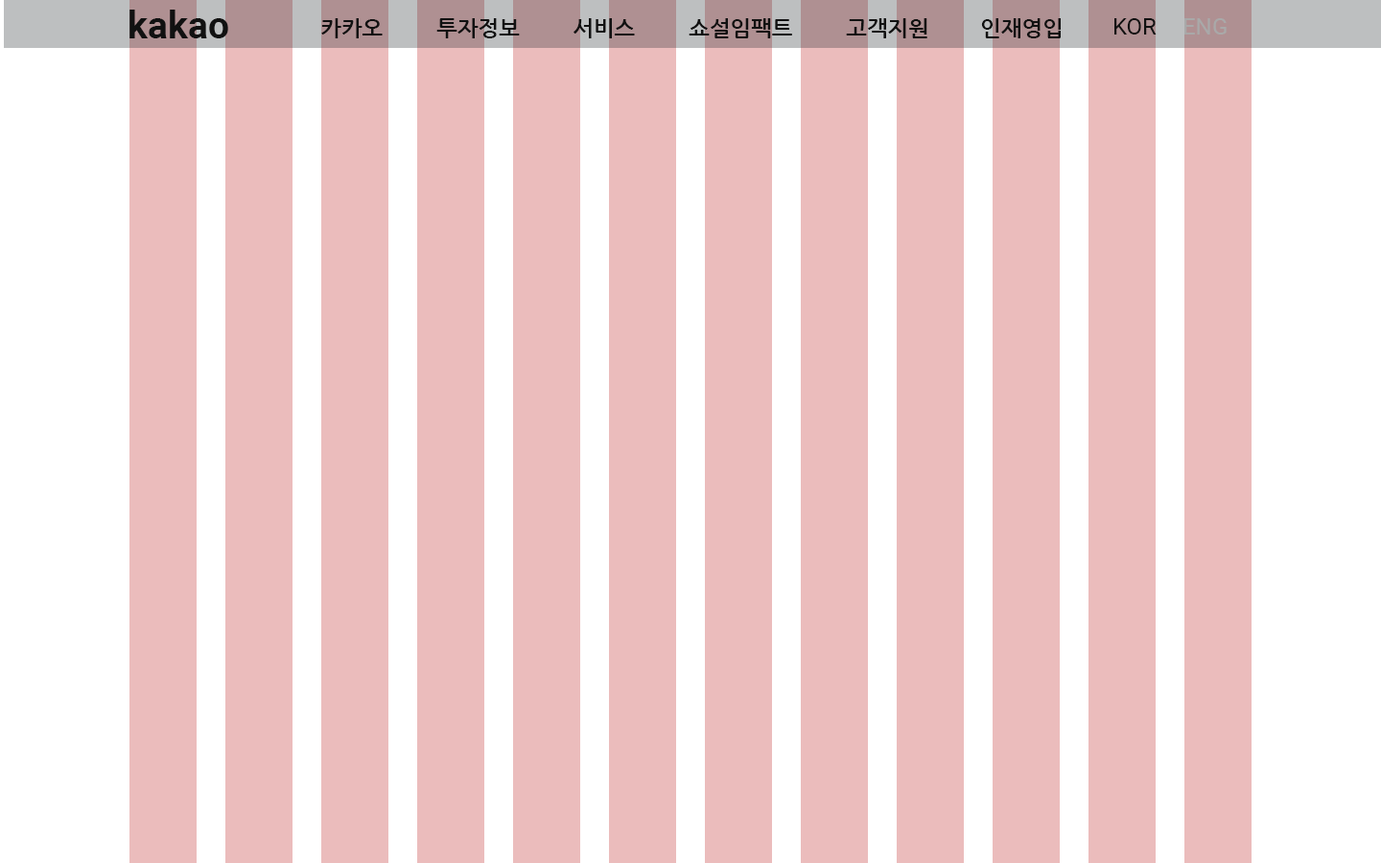
<style>
.page{position:relative;width:1381px;height:863px;background:#ebbcbc}
.page>*{position:absolute;margin:0}
.t1{font:37.4px "Roboto-Bold";color:#111111}
.t2{font:22.1px "NanumGothicBold";color:#111111}
.t3{font:23px "Roboto-Regular";color:#111111}
.t4{font:23px "Roboto-Regular";color:#a9a9a9}
</style>
<div class="page">
<p class="t1" style="left:129px;top:10px;width:99px;height:28px">kakao</p>
<p class="t2" style="left:321px;top:18px;width:62px;height:20px">카카오</p>
<p class="t2" style="left:436px;top:18px;width:84px;height:20px">투자정보</p>
<p class="t2" style="left:574px;top:18px;width:61px;height:20px">서비스</p>
<p class="t2" style="left:689px;top:18px;width:103px;height:20px">쇼설임팩트</p>
<p class="t2" style="left:846px;top:18px;width:82px;height:20px">고객지원</p>
<p class="t2" style="left:981px;top:18px;width:80px;height:20px">인재영입</p>
<p class="t3" style="left:1115px;top:18px;width:42px;height:17px">KOR</p>
<p class="t4" style="left:1185px;top:18px;width:42px;height:17px">ENG</p>
</div>
